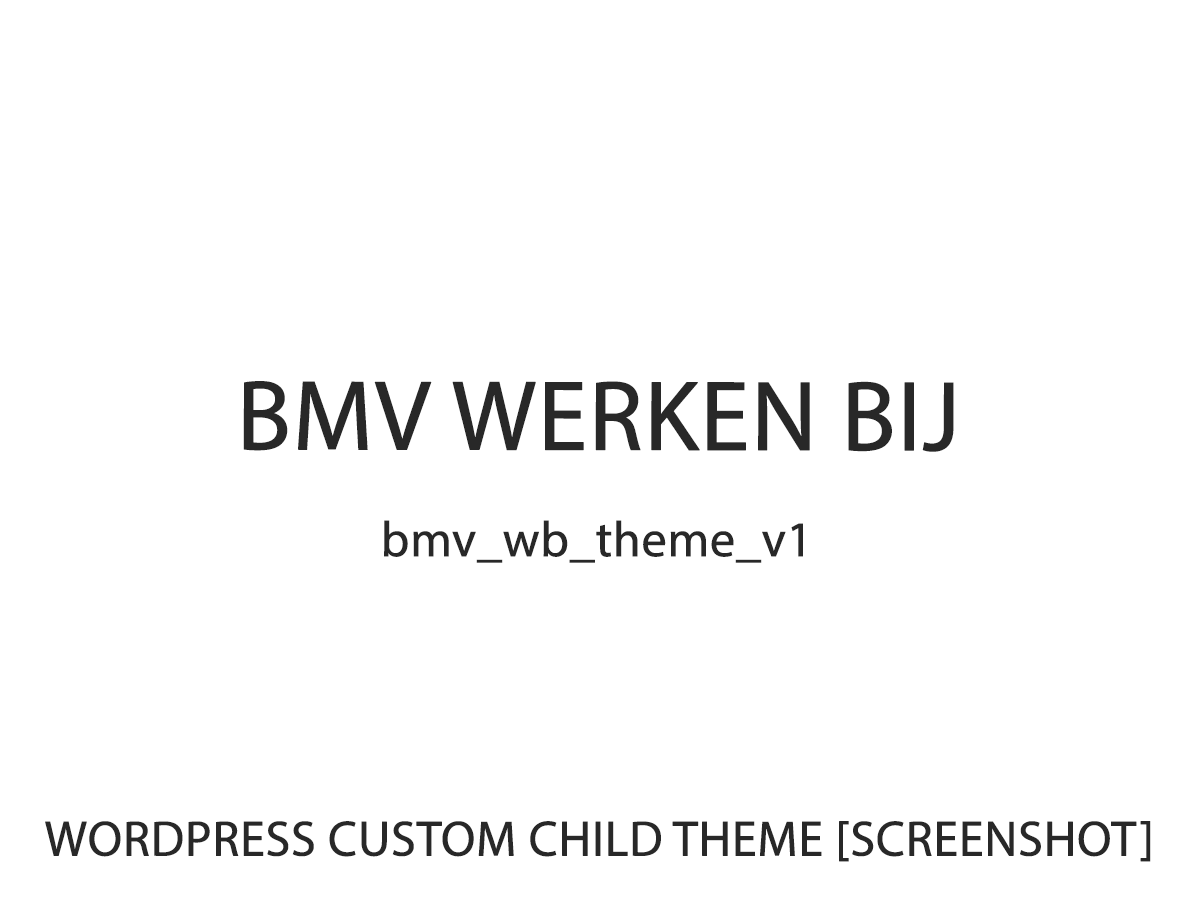
<style>
.page{position:relative;width:1200px;height:900px;background:#ffffff}
.page>*{position:absolute;margin:0}
.t1{font:100px "MyriadPro-Regular";letter-spacing:-0.01em;color:#282828;font-weight:bold}
.t2{font:50px "MyriadPro-Regular";letter-spacing:-0.01em;color:#282828;font-weight:bold}
</style>
<div class="page">
<p class="t1" style="left:243px;top:381px;width:711px;height:71px">BMV WERKEN BIJ</p>
<p class="t2" style="left:384px;top:520px;width:419px;height:43px">bmv_wb_theme_v1</p>
<p class="t2" style="left:45px;top:821px;width:1106px;height:41px">WORDPRESS CUSTOM CHILD THEME [SCREENSHOT]</p>
</div>
